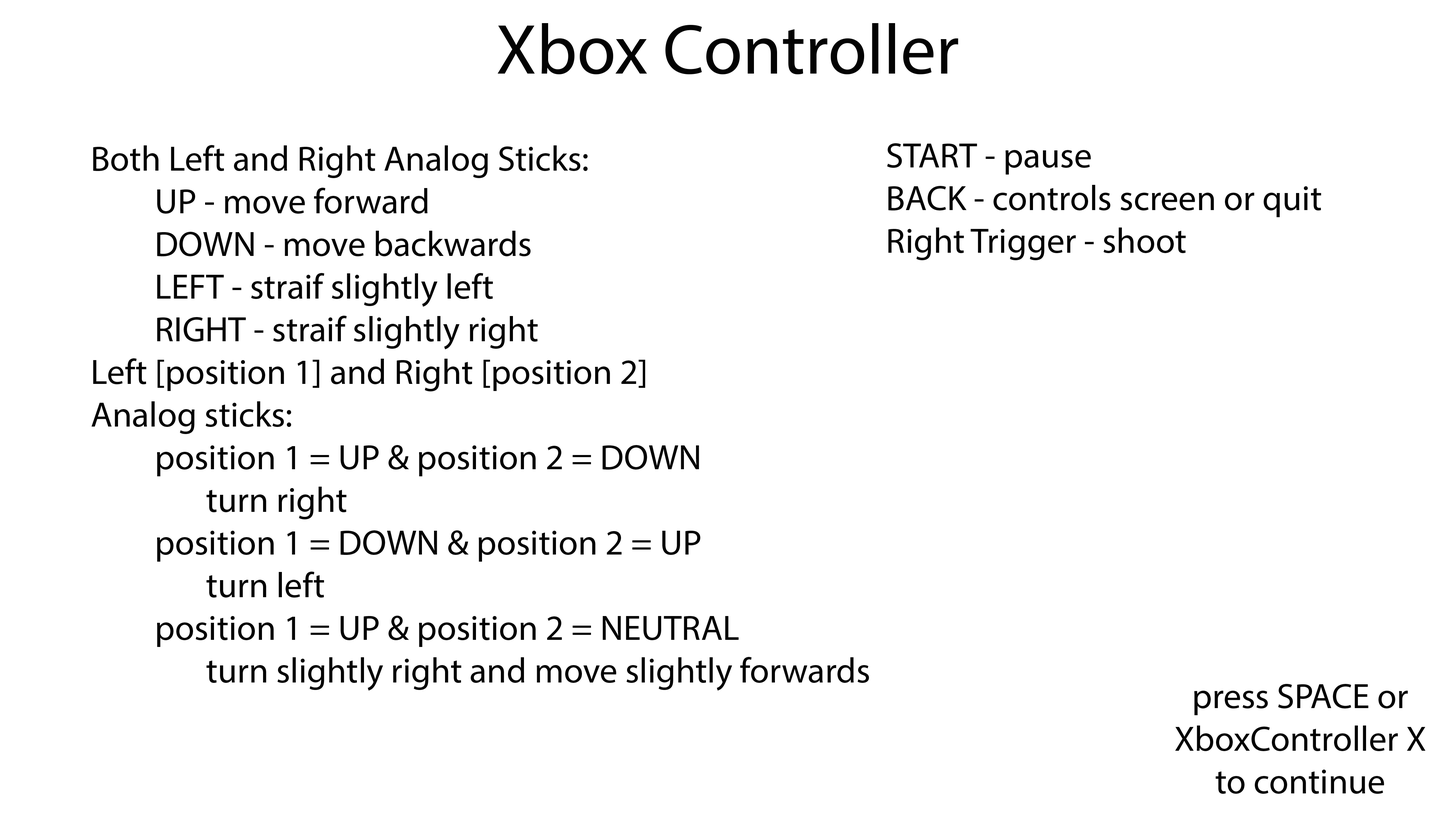
<style>
.page{position:relative;width:1456px;height:819px;background:#ffffff}
.page>*{position:absolute;margin:0}
.t1{font:71.1px "MyriadPro-Regular";color:#030303}
.t2{font:35.5px "MyriadPro-Regular";color:#030303}
</style>
<div class="page">
<p class="t1" style="left:498px;top:23px;width:460px;height:52px">Xbox Controller</p>
<p class="t2" style="left:91px;top:145px;width:778px;height:546px">Both Left and Right Analog Sticks:<br>     UP - move forward<br>     DOWN - move backwards<br>     LEFT - straif slightly left<br>     RIGHT - straif slightly right<br>Left [position 1] and Right [position 2]<br>Analog sticks:<br>     position 1 = UP &amp; position 2 = DOWN<br>         turn right<br>     position 1 = DOWN &amp; position 2 = UP<br>         turn left<br>     position 1 = UP &amp; position 2 = NEUTRAL<br>         turn slightly right and move slightly forwards</p>
<p class="t2" style="left:887px;top:143px;width:434px;height:117px">START - pause<br>BACK - controls screen or quit<br>Right Trigger - shoot</p>
<p class="t2" style="left:1175px;top:684px;width:250px;height:110px;text-align:center">press SPACE or<br>XboxController X<br>to continue</p>
</div>
